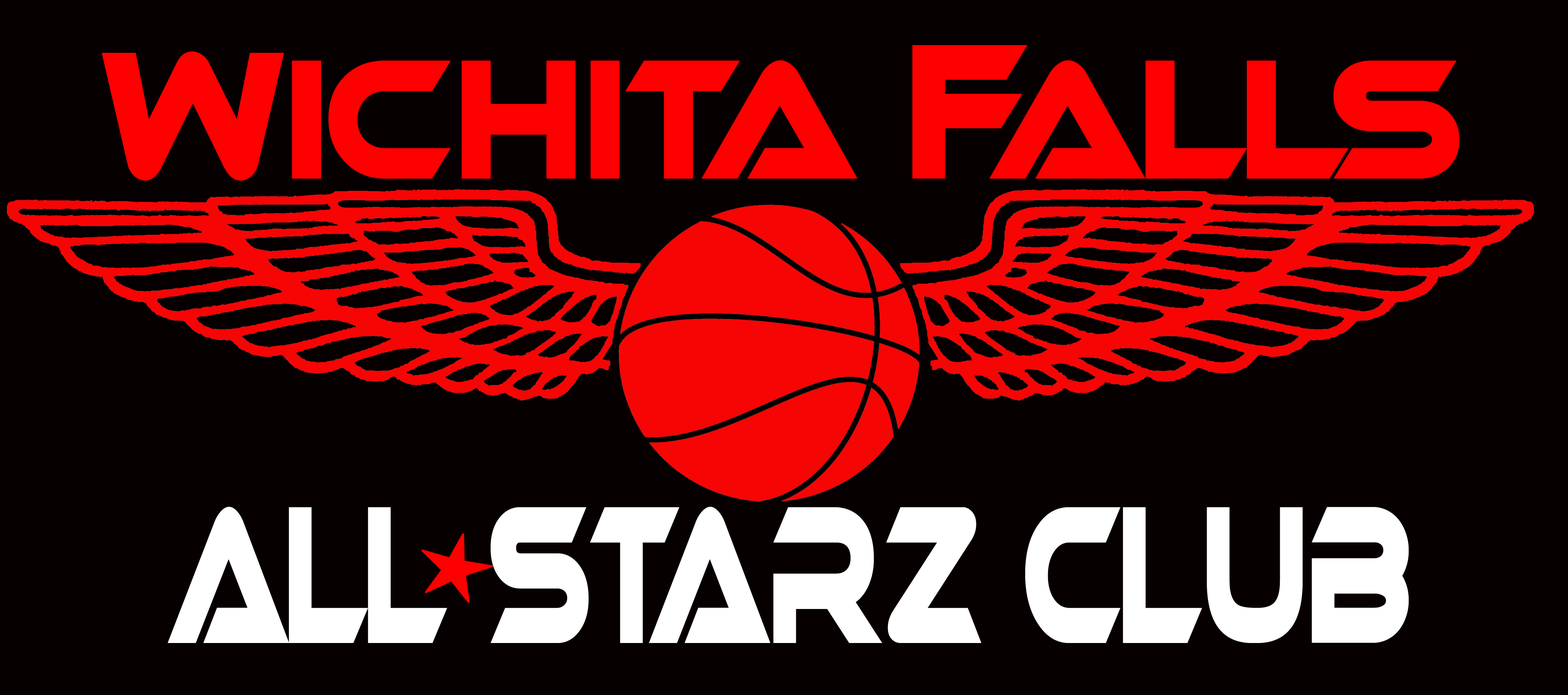
<style>
.page{position:relative;width:1568px;height:695px;background:#060000}
.page>*{position:absolute;margin:0}
.t1{font:163.7px "Ethnocentric";color:#ff0000;scale:0.79 1}
.t2{font:174.4px "Ethnocentric";color:#ff0000;scale:0.79 1}
.t3{font:185px "Ethnocentric";color:#ff0000;scale:0.79 1}
.t4{font:188.4px "Ethnocentric";color:#ffffff;scale:0.54 1}
</style>
<div class="page">
<p class="t1" style="left:102px;top:45px;width:1357px;height:136px"><span class="t2">W</span>ICHITA <span class="t3">F</span>ALLS</p>
<p class="t4" style="left:167px;top:506px;width:1242px;height:137px">All Starz Club</p>
</div>
